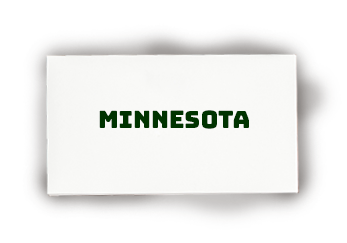
<style>
.page{position:relative;width:347px;height:243px;background:#ffffff}
.page>*{position:absolute;margin:0}
.t1{font:24px "Bungee-Regular";color:#003300}
</style>
<div class="page">
<p class="t1" style="left:99px;top:110px;width:150px;height:19px">Minnesota</p>
</div>
